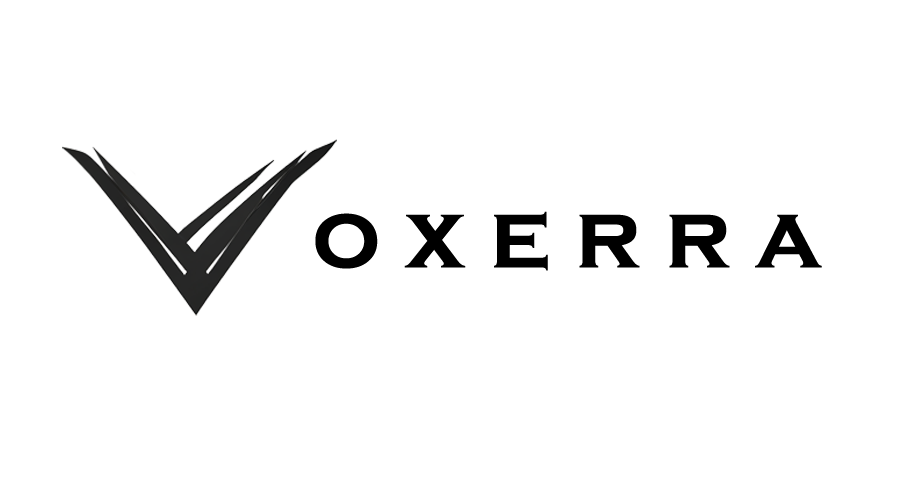
<style>
.page{position:relative;width:900px;height:500px;background:#ffffff}
.page>*{position:absolute;margin:0}
.t1{font:96px "CopperplateGothic-Bold";letter-spacing:0.25em;color:#000000}
</style>
<div class="page">
<p class="t1" style="left:315px;top:211px;width:507px;height:60px">oxerra</p>
</div>
